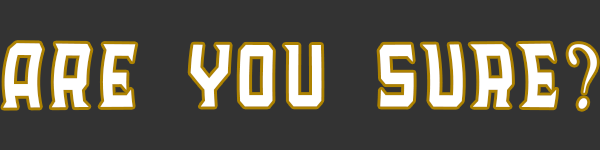
<style>
.page{position:relative;width:600px;height:150px;background:#333333}
.page>*{position:absolute;margin:0}
.t1{font:93.8px "Lorde-Havana";letter-spacing:0.1em;color:#ffffff;scale:0.75 1}
.t2{font:93.8px "TimesNewRomanPSMT";letter-spacing:0.1em;color:#ffffff;scale:0.75 1}
</style>
<div class="page">
<p class="t1" style="left:3px;top:43px;width:594px;height:66px">Are you sure<span class="t2">?</span></p>
</div>
